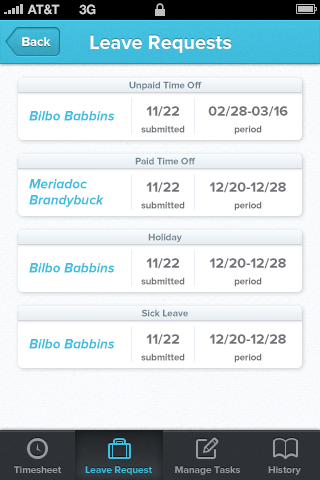
<style>
.page{position:relative;width:320px;height:480px;background:#ffffff}
.page>*{position:absolute;margin:0}
.t1{font:13px "HelveticaNeue-Bold";color:#d4d4d4;text-transform:uppercase}
.t2{font:13px "ProximaNova-Bold";color:#ffffff}
.t3{font:20px "ProximaNova-Bold";color:#ffffff}
.t4{font:10px "ProximaNova-Bold";color:#6e8590;scale:0.97 1}
.t5{font:14px "ProximaNova-BoldIt";color:#41bedd;scale:0.97 1}
.t6{font:14px "ProximaNova-Bold";color:#6f7276}
.t7{font:10px "ProximaNova-Bold";color:#6f7276;scale:0.95 1}
.t8{font:14px/16px "ProximaNova-BoldIt";color:#41bedd;scale:0.97 1}
.t9{font:10px "ProximaNova-Bold";color:#959ca3}
.t10{font:10px "ProximaNova-Bold";color:#41bedd}
</style>
<div class="page">
<p class="t1" style="left:27px;top:4px;width:33px;height:11px">AT&amp;t</p>
<p class="t1" style="left:79px;top:4px;width:17px;height:11px">3G</p>
<p class="t2" style="left:22px;top:37px;width:29px;height:9px">Back</p>
<p class="t3" style="left:90px;top:35px;width:142px;height:18px">Leave Requests</p>
<p class="t4" style="left:129px;top:81px;width:73px;height:10px">Unpaid Time Off</p>
<p class="t5" style="left:29px;top:111px;width:86px;height:10px">Bilbo Babbins</p>
<p class="t6" style="left:146px;top:106px;width:33px;height:11px">11/22</p>
<p class="t6" style="left:208px;top:106px;width:80px;height:11px">02/28-03/16</p>
<p class="t7" style="left:141px;top:125px;width:44px;height:8px">submitted</p>
<p class="t7" style="left:234px;top:125px;width:28px;height:10px">period</p>
<p class="t4" style="left:135px;top:157px;width:61px;height:8px">Paid Time Off</p>
<p class="t8" style="left:29px;top:179px;width:75px;height:28px">Meriadoc<br>Brandybuck</p>
<p class="t6" style="left:146px;top:182px;width:33px;height:11px">11/22</p>
<p class="t6" style="left:209px;top:182px;width:77px;height:11px">12/20-12/28</p>
<p class="t7" style="left:141px;top:201px;width:44px;height:8px">submitted</p>
<p class="t7" style="left:234px;top:201px;width:28px;height:10px">period</p>
<p class="t4" style="left:148px;top:233px;width:34px;height:10px">Holiday</p>
<p class="t5" style="left:29px;top:263px;width:86px;height:10px">Bilbo Babbins</p>
<p class="t6" style="left:146px;top:258px;width:33px;height:11px">11/22</p>
<p class="t6" style="left:209px;top:258px;width:77px;height:11px">12/20-12/28</p>
<p class="t7" style="left:141px;top:277px;width:44px;height:8px">submitted</p>
<p class="t7" style="left:234px;top:277px;width:28px;height:10px">period</p>
<p class="t4" style="left:141px;top:309px;width:47px;height:8px">Sick Leave</p>
<p class="t5" style="left:29px;top:339px;width:86px;height:10px">Bilbo Babbins</p>
<p class="t6" style="left:146px;top:334px;width:33px;height:11px">11/22</p>
<p class="t6" style="left:209px;top:334px;width:77px;height:11px">12/20-12/28</p>
<p class="t7" style="left:141px;top:353px;width:44px;height:8px">submitted</p>
<p class="t7" style="left:234px;top:353px;width:28px;height:10px">period</p>
<p class="t9" style="left:14px;top:466px;width:48px;height:7px">Timesheet</p>
<p class="t10" style="left:85px;top:466px;width:67px;height:9px">Leave Request</p>
<p class="t10" style="left:85px;top:466px;width:67px;height:9px">Leave Request</p>
<p class="t9" style="left:175px;top:466px;width:65px;height:9px">Manage Tasks</p>
<p class="t9" style="left:268px;top:466px;width:33px;height:9px">History</p>
</div>
